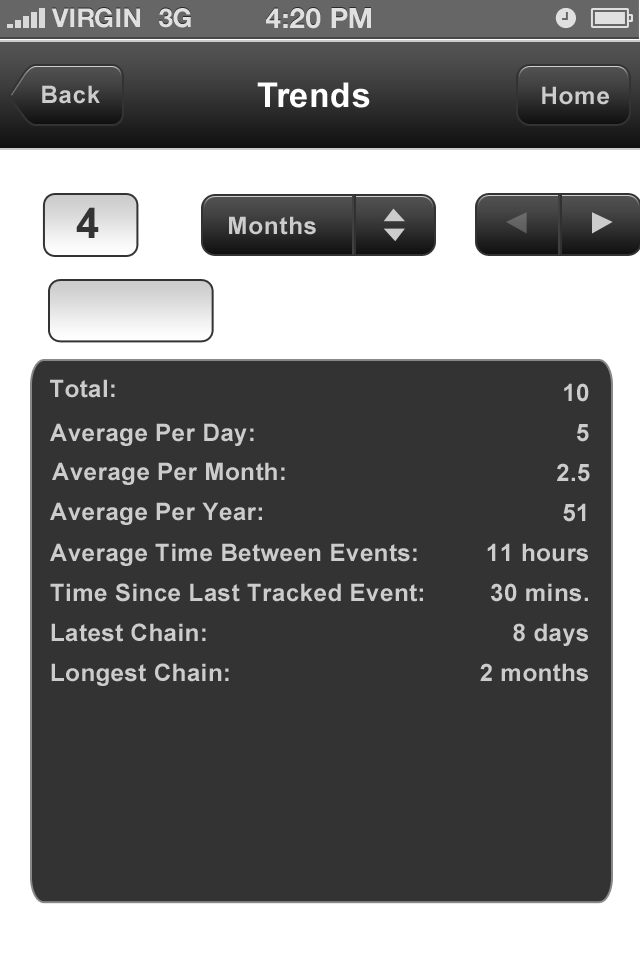
<style>
.page{position:relative;width:640px;height:960px;background:#333333}
.page>*{position:absolute;margin:0}
.t1{font:26px "HelveticaNeue-Bold";color:#e0e0e0;text-transform:uppercase}
.t2{font:28px "HelveticaNeue-Bold";color:#e0e0e0;text-transform:uppercase}
.t3{font:24px "Arial-BoldMT";letter-spacing:0.02em;color:#cccccc}
.t4{font:34px "Arial-BoldMT";letter-spacing:0.02em;color:#ffffff}
.t5{font:42px "Arial-BoldMT";letter-spacing:0.02em;color:#333333}
</style>
<div class="page">
<p class="t1" style="left:51px;top:8px;width:89px;height:20px">VIRGIN</p>
<p class="t1" style="left:159px;top:8px;width:32px;height:20px">3G</p>
<p class="t2" style="left:266px;top:8px;width:105px;height:21px">4:20 pM</p>
<p class="t3" style="left:42px;top:85px;width:58px;height:19px">Back</p>
<p class="t4" style="left:257px;top:82px;width:113px;height:26px">Trends</p>
<p class="t3" style="left:542px;top:86px;width:67px;height:19px">Home</p>
<p class="t5" style="left:76px;top:207px;width:23px;height:31px">4</p>
<p class="t3" style="left:229px;top:216px;width:87px;height:19px">Months</p>
<p class="t3" style="left:50px;top:379px;width:65px;height:19px">Total:</p>
<p class="t3" style="left:564px;top:383px;width:25px;height:19px">10</p>
<p class="t3" style="left:50px;top:423px;width:204px;height:23px">Average Per Day:</p>
<p class="t3" style="left:577px;top:424px;width:12px;height:18px">5</p>
<p class="t3" style="left:52px;top:462px;width:233px;height:23px">Average Per Month:</p>
<p class="t3" style="left:557px;top:463px;width:33px;height:19px">2.5</p>
<p class="t3" style="left:50px;top:502px;width:212px;height:23px">Average Per Year:</p>
<p class="t3" style="left:563px;top:503px;width:23px;height:19px">51</p>
<p class="t3" style="left:50px;top:543px;width:367px;height:23px">Average Time Between Events:</p>
<p class="t3" style="left:487px;top:543px;width:101px;height:19px">11 hours</p>
<p class="t3" style="left:50px;top:583px;width:373px;height:19px">Time Since Last Tracked Event:</p>
<p class="t3" style="left:491px;top:583px;width:97px;height:19px">30 mins.</p>
<p class="t3" style="left:51px;top:623px;width:155px;height:19px">Latest Chain:</p>
<p class="t3" style="left:513px;top:623px;width:75px;height:23px">8 days</p>
<p class="t3" style="left:51px;top:663px;width:178px;height:23px">Longest Chain:</p>
<p class="t3" style="left:480px;top:663px;width:108px;height:19px">2 months</p>
</div>
